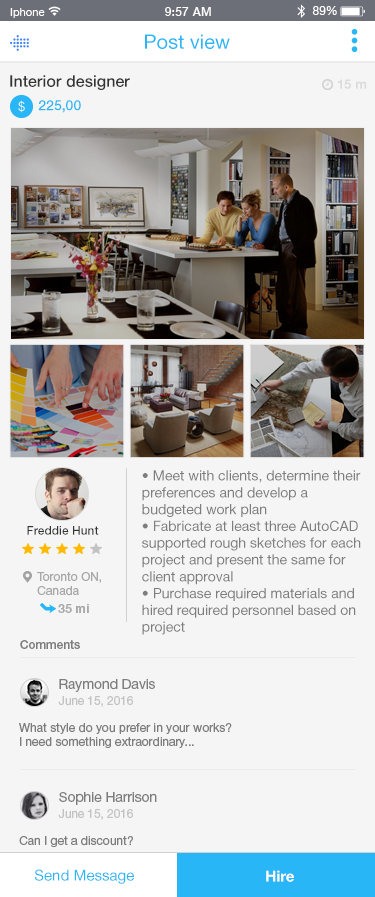
<style>
.page{position:relative;width:375px;height:897px;background:#f5f5f5}
.page>*{position:absolute;margin:0}
.t1{font:20px "HelveticaNeueCyr-Roman";color:#29b6f6}
.t2{font:16px "HelveticaNeueCyr-Medium";color:#343433}
.t3{font:13px "HelveticaNeueCyr-Bold";color:#dbdbdb}
.t4{font:14px "HelveticaNeueCyr-Medium";color:#29b6f6}
.t5{font:14px "HelveticaNeueCyr-Roman";color:#7d7d7d}
.t6{font:12px "HelveticaNeueCyr-Medium";color:#343433}
.t7{font:12px "HelveticaNeueCyr-Roman";color:#a8a8a8}
.t8{font:12px "HelveticaNeueCyr-Bold";color:#a8a8a8}
.t9{font:12px "HelveticaNeueCyr-Medium";color:#7d7d7d}
.t10{font:14px "HelveticaNeueCyr-Roman";letter-spacing:-0.01em;color:#7d7d7d}
.t11{font:12px "HelveticaNeueCyr-Roman";letter-spacing:-0.01em;color:#c3c3c3}
.t12{font:12px "HelveticaNeueCyr-Roman";color:#7d7d7d}
.t13{font:15px "HelveticaNeueCyr-Roman";color:#29b6f6}
.t14{font:15px "HelveticaNeueCyr-Bold";color:#ffffff}
</style>
<div class="page">
<p class="t1" style="left:145px;top:34px;width:85px;height:15px">Post view</p>
<p class="t2" style="left:10px;top:75px;width:120px;height:15px">Interior designer</p>
<p class="t3" style="left:338px;top:79px;width:29px;height:10px">15 m</p>
<p class="t4" style="left:38px;top:100px;width:43px;height:13px">225,00</p>
<p class="t5" style="left:142px;top:470px;width:219px;height:165px">• Meet with clients, determine their preferences and develop a budgeted work plan<br>• Fabricate at least three AutoCAD supported rough sketches for each project and present the same for client approval<br>• Purchase required materials and hired required personnel based on project<br>• Collaborate with architects and contractors during construction regarding special considerations based on the approved plan<br>• Carryout all project related documentation and maintain a project file</p>
<p class="t6" style="left:27px;top:526px;width:72px;height:9px">Freddie Hunt</p>
<p class="t7" style="left:37px;top:572px;width:64px;height:24px">Toronto ON,<br>Canada</p>
<p class="t8" style="left:58px;top:604px;width:31px;height:9px">35 mi</p>
<p class="t9" style="left:20px;top:640px;width:60px;height:9px">Comments</p>
<p class="t10" style="left:59px;top:679px;width:96px;height:13px">Raymond Davis</p>
<p class="t11" style="left:58px;top:696px;width:75px;height:11px">June 15, 2016</p>
<p class="t12" style="left:19px;top:723px;width:213px;height:25px">What style do you prefer in your works?<br>I need something extraordinary...</p>
<p class="t10" style="left:59px;top:792px;width:98px;height:13px">Sophie Harrison</p>
<p class="t11" style="left:58px;top:809px;width:75px;height:11px">June 15, 2016</p>
<p class="t12" style="left:19px;top:836px;width:114px;height:11px">Can I get a discount?</p>
<p class="t13" style="left:35px;top:869px;width:99px;height:15px">Send Message</p>
<p class="t14" style="left:266px;top:870px;width:28px;height:12px">Hire</p>
</div>
